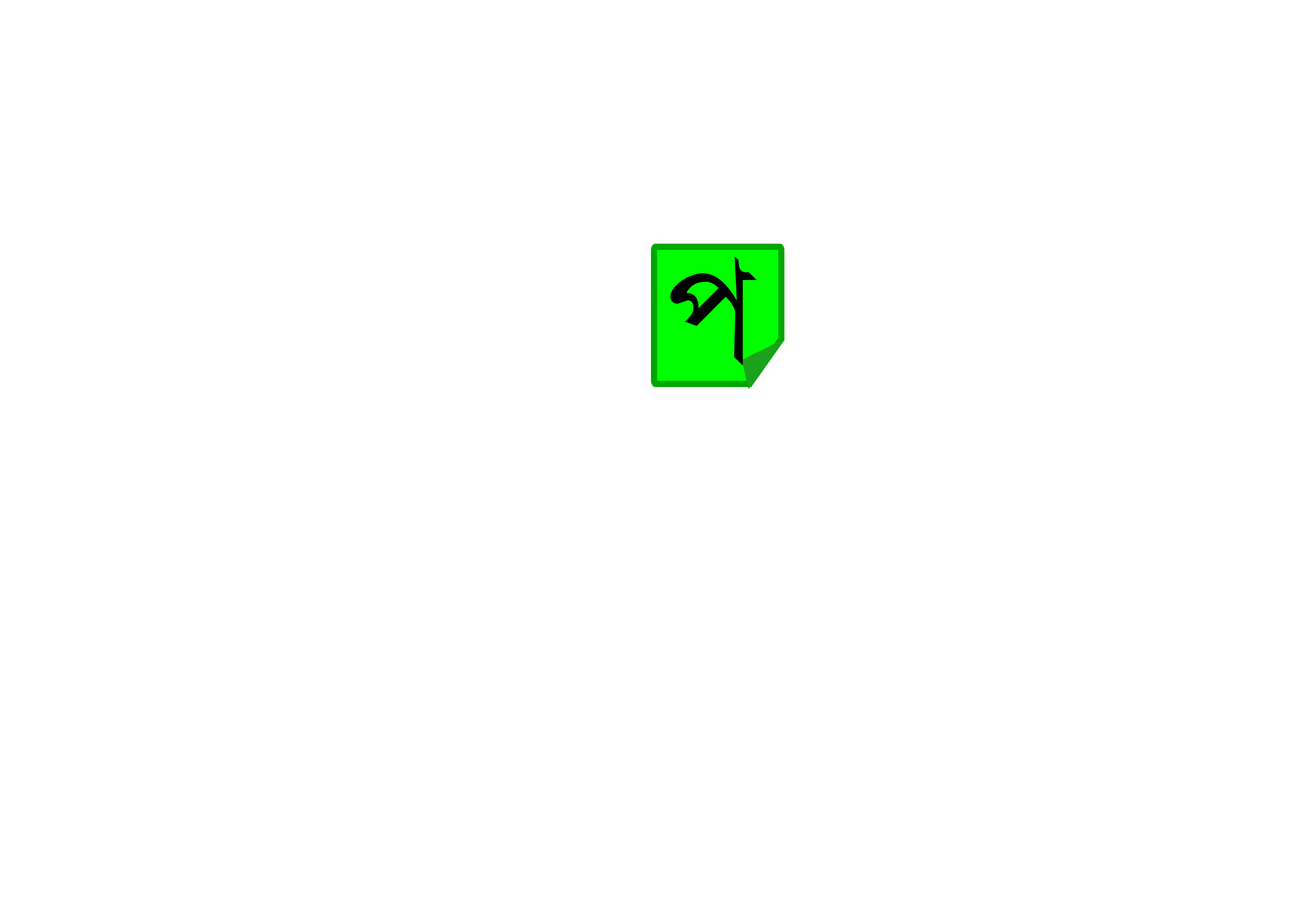
<style>
.page{position:relative;width:1292px;height:923px;background:#ffffff}
.page>*{position:absolute;margin:0}
.t1{font:146.1px "Kalpurush";color:#000000}
</style>
<div class="page">
<p class="t1" style="left:670px;top:257px;width:87px;height:108px">প</p>
</div>
